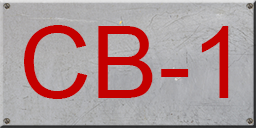
<style>
.page{position:relative;width:256px;height:128px}
.page>*{position:absolute;margin:0}
.t1{font:99.5px "ArialMT";color:#c40000}
</style>
<div class="page">
<p class="t1" style="left:24px;top:25px;width:205px;height:74px">СВ-1</p>
</div>
